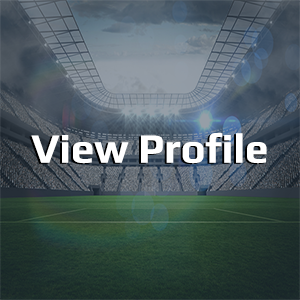
<style>
.page{position:relative;width:300px;height:300px}
.page>*{position:absolute;margin:0}
.t1{font:41.7px "Play-Bold";color:#ffffff}
</style>
<div class="page">
<p class="t1" style="left:31px;top:133px;width:236px;height:31px">View Profile</p>
</div>
